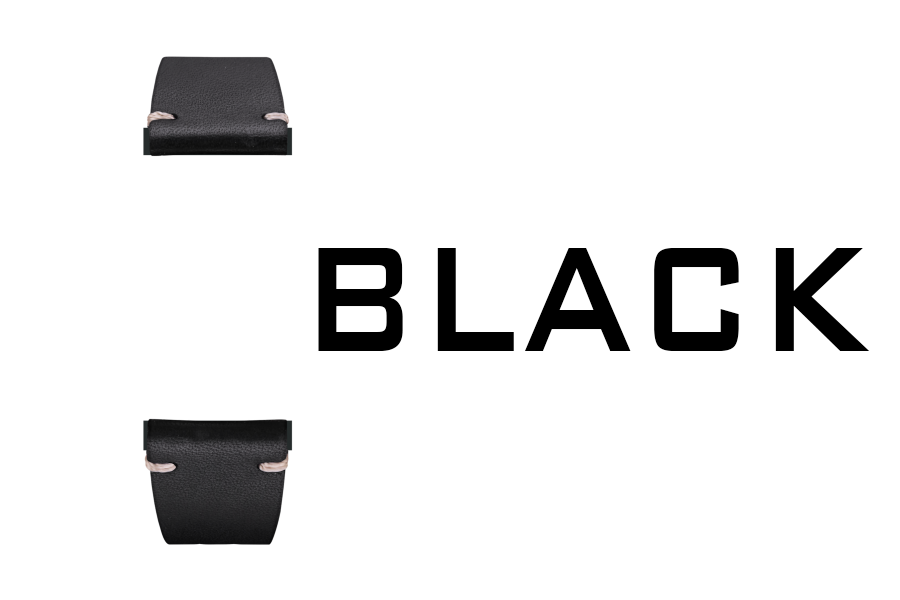
<style>
.page{position:relative;width:900px;height:600px;background:#ffffff}
.page>*{position:absolute;margin:0}
.t1{font:200px "BankGothicBT-Medium";color:#000000;scale:0.75 1}
</style>
<div class="page">
<p class="t1" style="left:318px;top:248px;width:552px;height:103px">BLACK</p>
</div>
